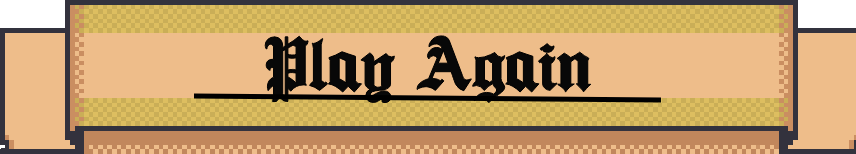
<style>
.page{position:relative;width:856px;height:154px;background:#eebd8a}
.page>*{position:absolute;margin:0}
.t1{font:81px "Ancient-Medium";color:#080808}
</style>
<div class="page">
<p class="t1" style="left:264px;top:34px;width:328px;height:70px">Play Again</p>
</div>
